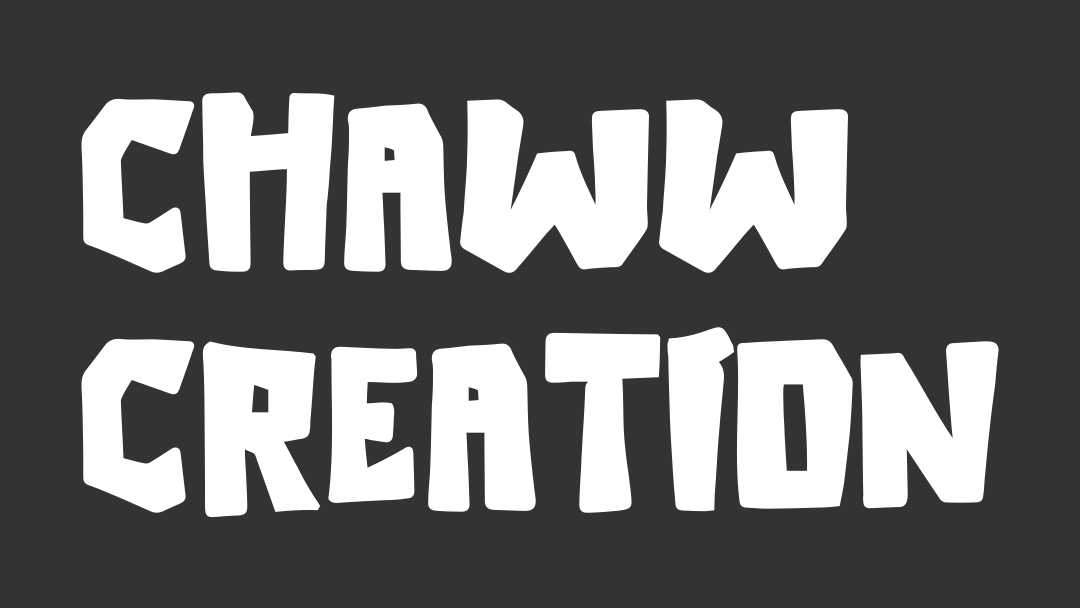
<style>
.page{position:relative;width:1080px;height:608px;background:#333333}
.page>*{position:absolute;margin:0}
.t1{font:200px "Ramen-Hot";color:#ffffff;font-weight:bold}
</style>
<div class="page">
<p class="t1" style="left:81px;top:92px;width:918px;height:426px">Chaww<br>Creation</p>
</div>
